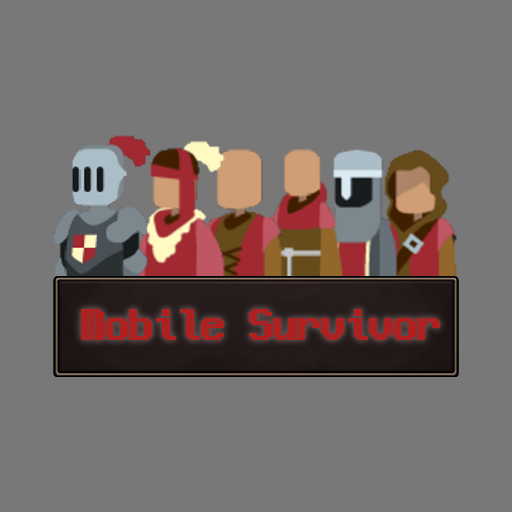
<style>
.page{position:relative;width:512px;height:512px;background:#787878}
.page>*{position:absolute;margin:0}
.t1{font:48px "NeoDunggeunmo-Regular";color:#ad2121;font-weight:bold}
</style>
<div class="page">
<p class="t1" style="left:81px;top:309px;width:359px;height:31px">Mobile Survivor</p>
</div>
